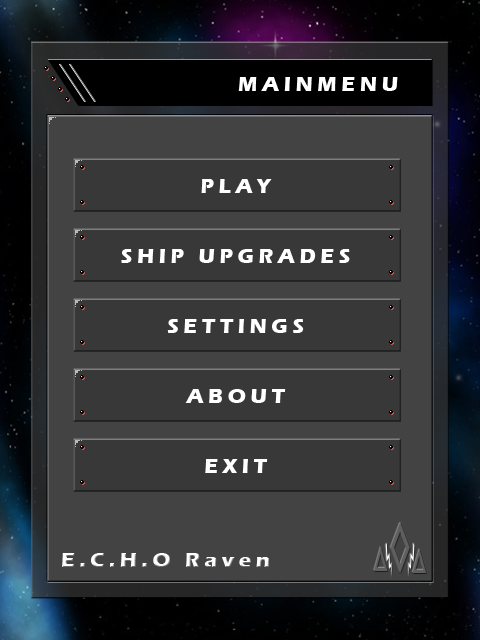
<style>
.page{position:relative;width:480px;height:640px;background:#434343}
.page>*{position:absolute;margin:0}
.t1{font:21px "ErasITC-Bold";letter-spacing:0.22em;color:#ffffff}
</style>
<div class="page">
<p class="t1" style="left:238px;top:77px;width:160px;height:14px">MAINMENU</p>
<p class="t1" style="left:201px;top:179px;width:71px;height:14px">PLAY</p>
<p class="t1" style="left:121px;top:249px;width:229px;height:14px">SHIP UPGRADES</p>
<p class="t1" style="left:167px;top:319px;width:137px;height:14px">SETTINGS</p>
<p class="t1" style="left:185px;top:389px;width:101px;height:14px">ABOUT</p>
<p class="t1" style="left:205px;top:459px;width:63px;height:14px">EXIT</p>
<p class="t1" style="left:62px;top:553px;width:207px;height:14px">E.C.H.O Raven</p>
</div>
